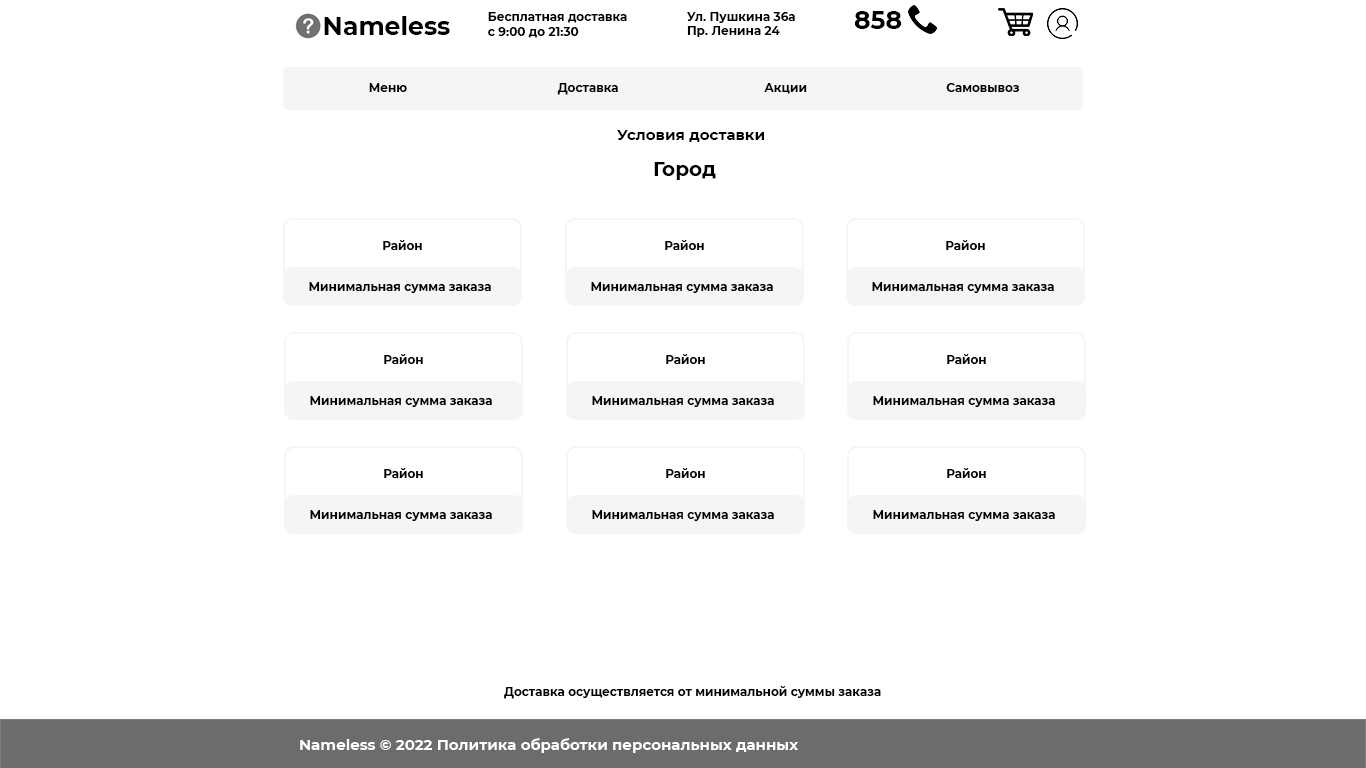
<style>
.page{position:relative;width:1366px;height:768px;background:#ffffff}
.page>*{position:absolute;margin:0}
.t1{font:25px "Montserrat-Bold";color:#000000}
.t2{font:12px "Montserrat-Bold";color:#000000}
.t3{font:15px "Montserrat-Bold";color:#010101}
.t4{font:20px "Montserrat-Bold";color:#010101}
.t5{font:12px "Montserrat-Bold";color:#010101}
.t6{font:15px "Montserrat-Bold";color:#ffffff}
</style>
<div class="page">
<p class="t1" style="left:324px;top:16px;width:126px;height:19px">Nameless</p>
<p class="t2" style="left:488px;top:12px;width:139px;height:26px">Бесплатная доставка<br>с 9:00 до 21:30</p>
<p class="t2" style="left:687px;top:12px;width:108px;height:25px">Ул. Пушкина 36а<br>Пр. Ленина 24</p>
<p class="t1" style="left:854px;top:11px;width:48px;height:18px">858</p>
<p class="t2" style="left:369px;top:83px;width:38px;height:9px">Меню</p>
<p class="t2" style="left:557px;top:83px;width:61px;height:12px">Доставка</p>
<p class="t2" style="left:764px;top:83px;width:43px;height:11px">Акции</p>
<p class="t2" style="left:946px;top:83px;width:74px;height:9px">Самовывоз</p>
<p class="t3" style="left:617px;top:130px;width:147px;height:12px">Условия доставки</p>
<p class="t4" style="left:654px;top:162px;width:62px;height:18px">Город</p>
<p class="t5" style="left:383px;top:240px;width:39px;height:10px">Район</p>
<p class="t5" style="left:665px;top:240px;width:39px;height:10px">Район</p>
<p class="t5" style="left:946px;top:240px;width:39px;height:10px">Район</p>
<p class="t5" style="left:309px;top:282px;width:182px;height:11px">Минимальная сумма заказа</p>
<p class="t5" style="left:591px;top:282px;width:182px;height:11px">Минимальная сумма заказа</p>
<p class="t5" style="left:872px;top:282px;width:182px;height:11px">Минимальная сумма заказа</p>
<p class="t5" style="left:384px;top:354px;width:39px;height:10px">Район</p>
<p class="t5" style="left:666px;top:354px;width:39px;height:10px">Район</p>
<p class="t5" style="left:947px;top:354px;width:39px;height:10px">Район</p>
<p class="t5" style="left:310px;top:396px;width:182px;height:11px">Минимальная сумма заказа</p>
<p class="t5" style="left:592px;top:396px;width:182px;height:11px">Минимальная сумма заказа</p>
<p class="t5" style="left:873px;top:396px;width:182px;height:11px">Минимальная сумма заказа</p>
<p class="t5" style="left:384px;top:468px;width:39px;height:10px">Район</p>
<p class="t5" style="left:666px;top:468px;width:39px;height:10px">Район</p>
<p class="t5" style="left:947px;top:468px;width:39px;height:10px">Район</p>
<p class="t5" style="left:310px;top:510px;width:182px;height:11px">Минимальная сумма заказа</p>
<p class="t5" style="left:592px;top:510px;width:182px;height:11px">Минимальная сумма заказа</p>
<p class="t5" style="left:873px;top:510px;width:182px;height:11px">Минимальная сумма заказа</p>
<p class="t5" style="left:504px;top:686px;width:377px;height:13px">Доставка осуществляется от минимальной суммы заказа</p>
<p class="t6" style="left:300px;top:738px;width:499px;height:15px">Nameless © 2022 Политика обработки персональных данных</p>
</div>
